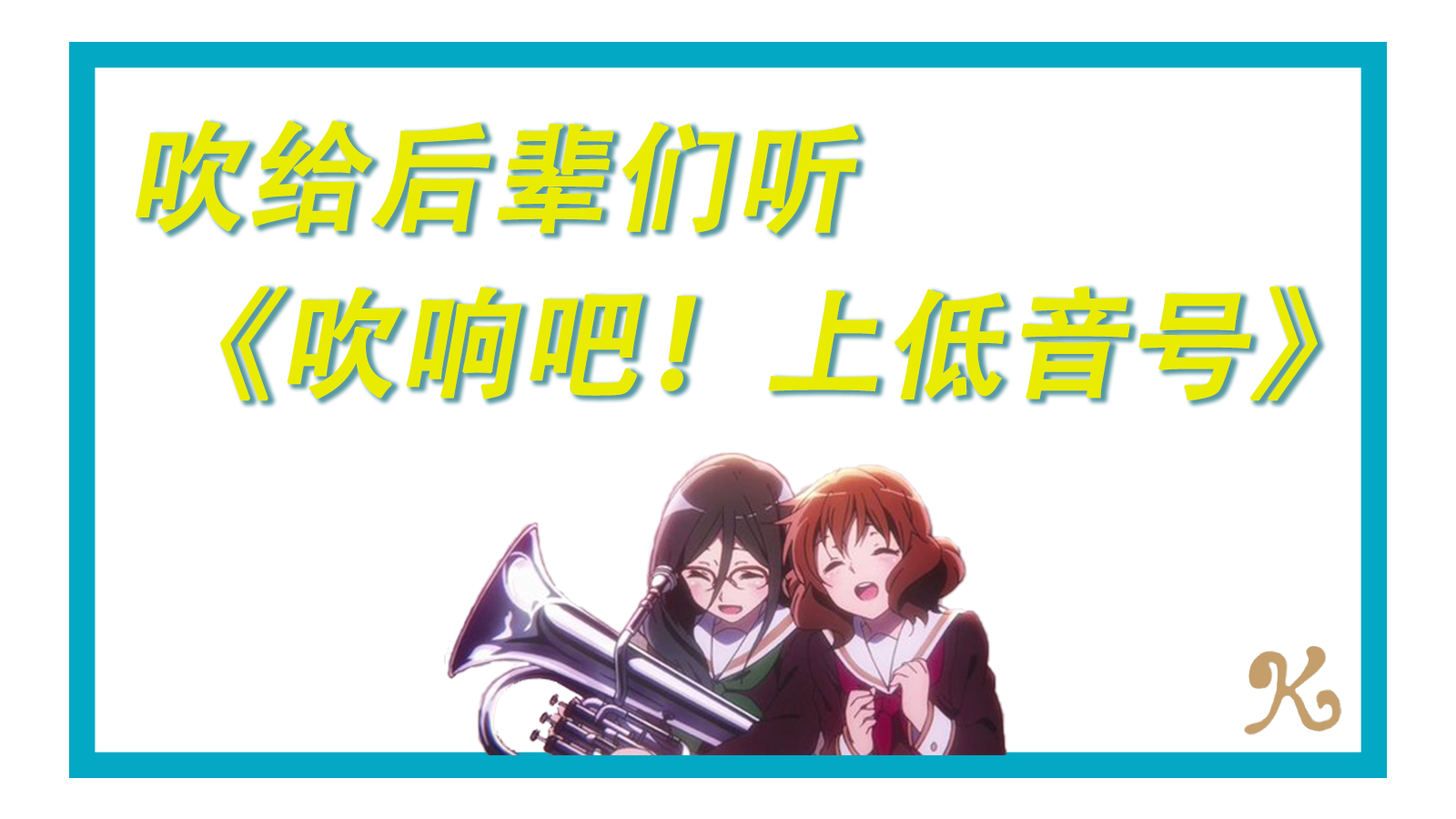
<style>
.page{position:relative;width:1456px;height:819px;background:#ffffff}
.page>*{position:absolute;margin:0}
.t1{font:118.3px/166.8px "AdobeHeitiStd-Regular";color:#e9ec00;font-weight:bold;font-style:italic}
</style>
<div class="page">
<p class="t1" style="left:136px;top:120px;width:1182px;height:281px">吹给后辈们听<br>  《吹响吧！上低音号》</p>
</div>
